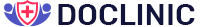
<style>
.page{position:relative;width:202px;height:27px;background:#ffffff}
.page>*{position:absolute;margin:0}
.t1{font:30px "Rubik-Medium";color:#12143b;text-transform:uppercase}
</style>
<div class="page">
<p class="t1" style="left:58px;top:4px;width:137px;height:21px">Doclinic</p>
</div>
